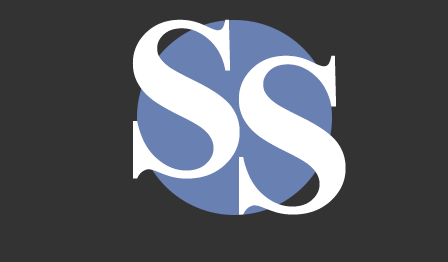
<style>
.page{position:relative;width:448px;height:262px;background:#333333}
.page>*{position:absolute;margin:0}
.t1{font:228.5px "TimesNewRomanPS-BoldMT";color:#ffffff}
</style>
<div class="page">
<p class="t1" style="left:132px;top:19px;width:108px;height:160px">S</p>
<p class="t1" style="left:238px;top:55px;width:108px;height:160px">S</p>
</div>
